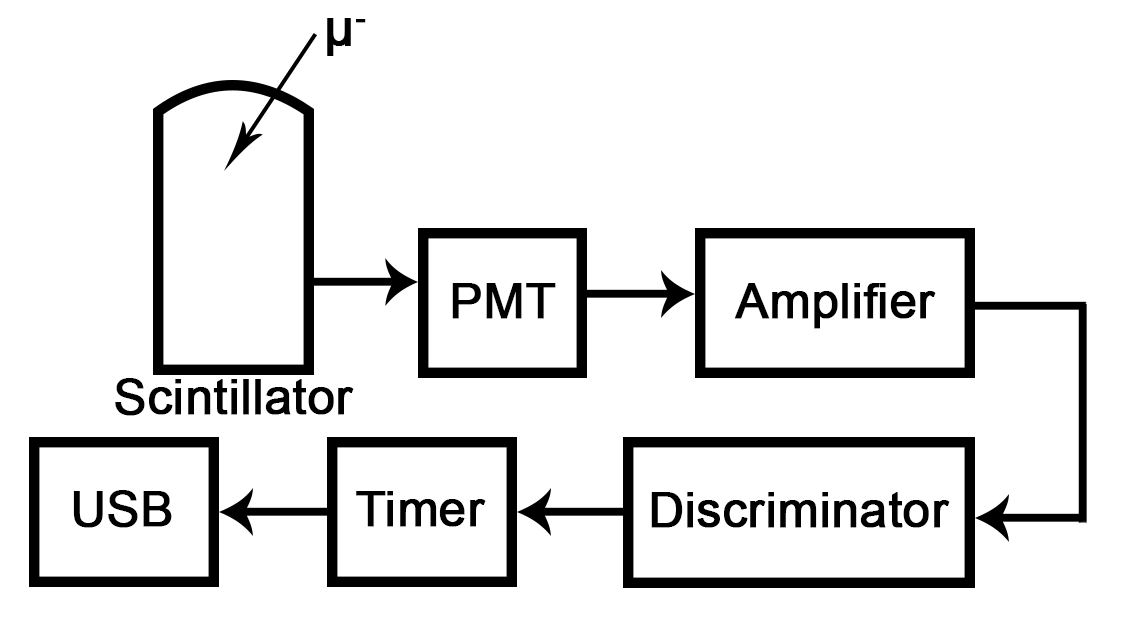
<style>
.page{position:relative;width:1125px;height:625px;background:#ffffff}
.page>*{position:absolute;margin:0}
.t1{font:52.1px "ArialMT";color:#000000;font-weight:bold}
.t2{font:83.3px "ArialMT";color:#000000;font-weight:bold}
</style>
<div class="page">
<p class="t1" style="left:327px;top:18px;width:39px;height:38px">μ-</p>
<p class="t2" style="left:452px;top:283px;width:104px;height:36px">PMT</p>
<p class="t2" style="left:734px;top:283px;width:202px;height:46px">Amplifier</p>
<p class="t2" style="left:115px;top:378px;width:239px;height:38px">Scintillator</p>
<p class="t2" style="left:73px;top:490px;width:99px;height:38px">USB</p>
<p class="t2" style="left:356px;top:491px;width:130px;height:36px">Timer</p>
<p class="t2" style="left:651px;top:492px;width:299px;height:36px">Discriminator</p>
</div>
